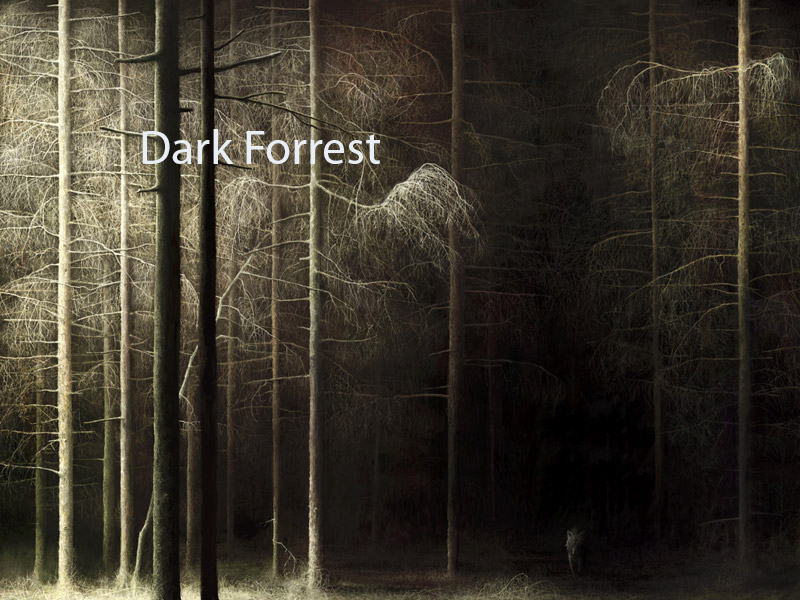
<style>
.page{position:relative;width:800px;height:600px}
.page>*{position:absolute;margin:0}
.t1{font:48px "MyriadPro-Regular";color:#e9eef4}
</style>
<div class="page">
<p class="t1" style="left:142px;top:129px;width:238px;height:35px">Dark Forrest</p>
</div>
